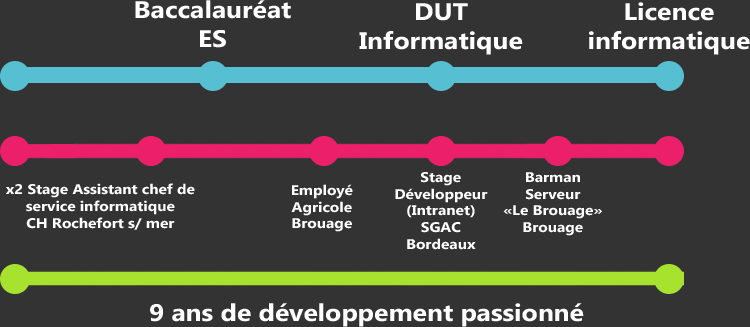
<style>
.page{position:relative;width:750px;height:327px;background:#333333}
.page>*{position:absolute;margin:0}
.t1{font:24px "Ebrima-Bold";color:#ffffff;scale:1.1 1}
.t2{font:14px "Ebrima-Bold";color:#ffffff;scale:1.1 1}
</style>
<div class="page">
<p class="t1" style="left:135px;top:0px;width:156px;height:48px;text-align:center">Baccalauréat <br>ES</p>
<p class="t1" style="left:359px;top:3px;width:164px;height:52px;text-align:center">DUT <br>Informatique</p>
<p class="t1" style="left:589px;top:2px;width:161px;height:53px;text-align:center">Licence <br>informatique</p>
<p class="t2" style="left:395px;top:172px;width:93px;height:78px;text-align:center">Stage <br>Développeur <br>(Intranet) <br>SGAC<br>Bordeaux</p>
<p class="t2" style="left:503px;top:172px;width:99px;height:64px;text-align:center">Barman<br>Serveur<br>«Le Brouage»<br>Brouage</p>
<p class="t2" style="left:6px;top:183px;width:189px;height:47px;text-align:center">x2 Stage Assistant chef de service informatique <br>CH Rochefort s/ mer</p>
<p class="t2" style="left:291px;top:184px;width:62px;height:48px;text-align:center">Employé Agricole<br>Brouage</p>
<p class="t1" style="left:150px;top:303px;width:434px;height:24px">9 ans de développement passionné</p>
</div>
